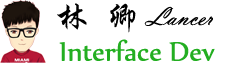
<style>
.page{position:relative;width:227px;height:64px;background:#ffffff}
.page>*{position:absolute;margin:0}
.t1{font:34px "SingkaiCSEG-Bold-GB";color:#000000}
.t2{font:28px "VladimirScript";color:#000000}
.t3{font:32px "Nyala-Regular";color:#23ae21}
</style>
<div class="page">
<p class="t1" style="left:57px;top:3px;width:79px;height:30px">林 卿</p>
<p class="t2" style="left:144px;top:6px;width:69px;height:20px">Lancer</p>
<p class="t3" style="left:59px;top:39px;width:156px;height:22px">Interface Dev</p>
</div>
